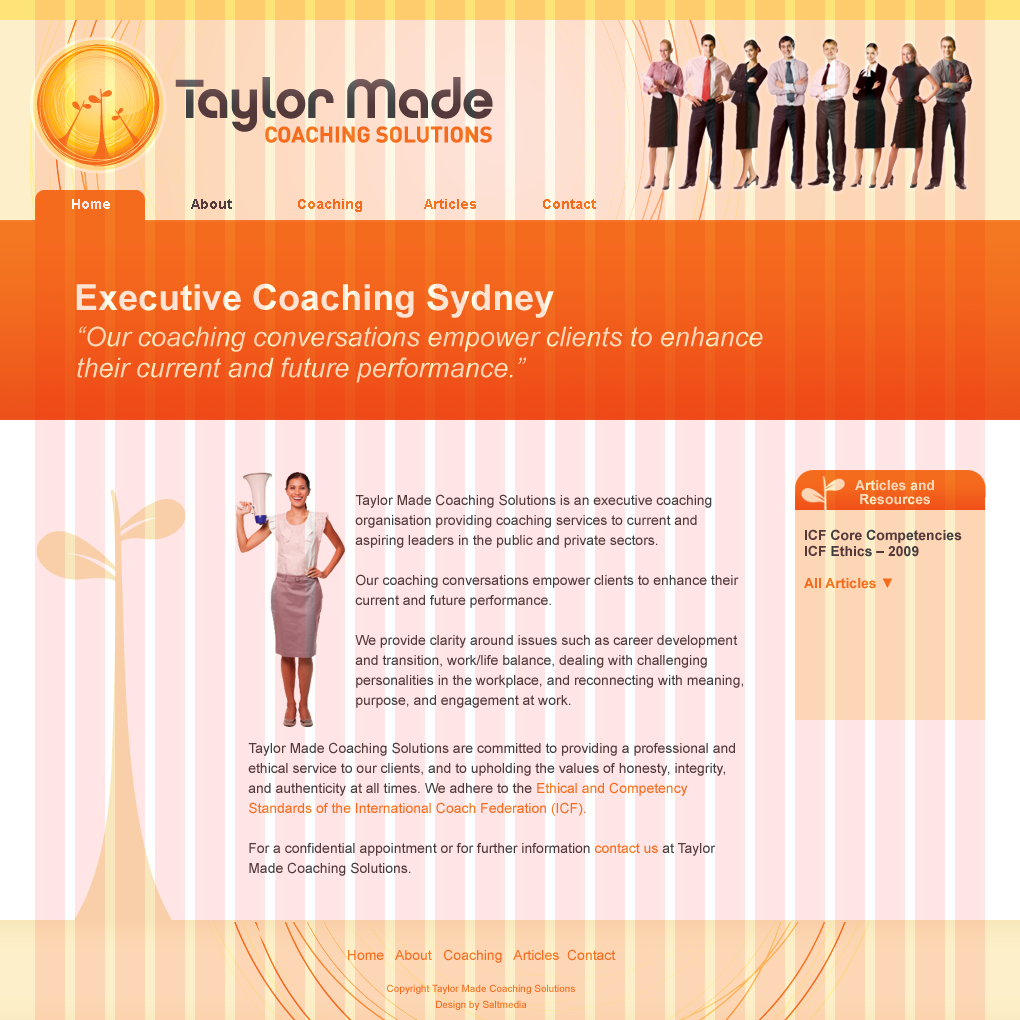
<style>
.page{position:relative;width:1020px;height:1020px;background:#ffe5e5}
.page>*{position:absolute;margin:0}
.t1{font:14px "Arial-BoldMT";color:#ffe5e5}
.t2{font:14px "Arial-BoldMT";color:#404041}
.t3{font:14px "Arial-BoldMT";color:#f47721}
.t4{font:36px "Arial-BoldMT";color:#ffe4d4}
.t5{font:27px/31px "Arial-ItalicMT";color:#fdefc9}
.t6{font:14px/14px "Arial-BoldMT";color:#fdefc9}
.t7{font:14px/20px "ArialMT";color:#404041}
.t8{font:14px/16px "Arial-BoldMT";color:#404041}
.t9{font:14px/16px "Arial-BoldMT";color:#f47721}
.t10{font:14px/20px "ArialMT";color:#f47721}
.t11{font:10px/16px "ArialMT";color:#f47721}
</style>
<div class="page">
<p class="t1" style="left:72px;top:199px;width:38px;height:10px">Home</p>
<p class="t2" style="left:191px;top:199px;width:41px;height:10px">About</p>
<p class="t3" style="left:298px;top:199px;width:64px;height:13px">Coaching</p>
<p class="t3" style="left:424px;top:199px;width:52px;height:10px">Articles</p>
<p class="t3" style="left:543px;top:199px;width:53px;height:10px">Contact</p>
<p class="t4" style="left:76px;top:283px;width:478px;height:35px">Executive Coaching Sydney</p>
<p class="t5" style="left:77px;top:326px;width:686px;height:57px">“Our coaching conversations empower clients to enhance their current and future performance.”</p>
<p class="t6" style="left:855px;top:480px;width:79px;height:25px;text-align:center">Articles and<br>Resources</p>
<p class="t7" style="left:355px;top:494px;width:388px;height:214px">Taylor Made Coaching Solutions is an executive coaching organisation providing coaching services to current and aspiring leaders in the public and private sectors.<br> <br>Our coaching conversations empower clients to enhance their current and future performance. <br><br>We provide clarity around issues such as career development and transition, work/life balance, dealing with challenging personalities in the workplace, and reconnecting with meaning, purpose, and engagement at work.</p>
<p class="t8" style="left:804px;top:529px;width:158px;height:60px">ICF Core Competencies<br>ICF Ethics – 2009<br><br><span class="t9">All Articles ▼</span></p>
<p class="t7" style="left:248px;top:742px;width:487px;height:134px">Taylor Made Coaching Solutions are committed to providing a professional and ethical service to our clients, and to upholding the values of honesty, integrity, and authenticity at all times. We adhere to the <span class="t10">Ethical and Competency Standards of the International Coach Federation (ICF).<br></span> <br>For a confidential appointment or for further information<span class="t10"> contact us </span>at Taylor Made Coaching Solutions.</p>
<p class="t11" style="left:348px;top:949px;width:268px;height:61px;text-align:center"><span class="t10">Home   About   Coaching   Articles  Contact<br></span><br>Copyright Taylor Made Coaching Solutions<br>Design by Saltmedia</p>
</div>
